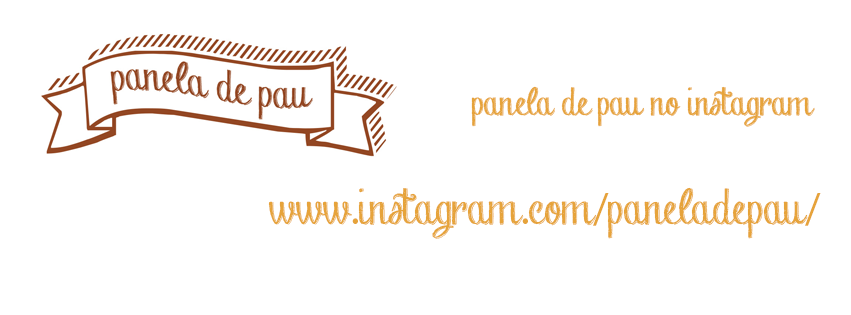
<style>
.page{position:relative;width:851px;height:315px;background:#ffffff}
.page>*{position:absolute;margin:0}
.t1{font:35px "Chalk-hand-lettering-shaded_demo";color:#e6a33a}
.t2{font:45px "Chalk-hand-lettering-shaded_demo";color:#e6a33a}
.t3{font:45px "MyriadPro-Regular";color:#e6a33a}
</style>
<div class="page">
<p class="t1" style="left:471px;top:86px;width:344px;height:41px">panela de pau no instagram</p>
<p class="t2" style="left:268px;top:187px;width:553px;height:52px">www<span class="t3">.</span>instagram<span class="t3">.</span>com<span class="t3">/</span>paneladepau<span class="t3">/</span></p>
</div>
